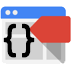
<style>
.page{position:relative;width:72px;height:72px;background:#ffffff}
.page>*{position:absolute;margin:0}
.t1{font:36px "Consolas-Bold";color:#000000;font-weight:bold;scale:0.83 1}
</style>
<div class="page">
<p class="t1" style="left:3px;top:23px;width:32px;height:35px">{}</p>
</div>
